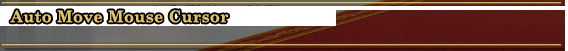
<style>
.page{position:relative;width:568px;height:51px}
.page>*{position:absolute;margin:0}
.t1{font:16px "CenturySchoolbook-Bold";letter-spacing:0.025em;color:#e4c567}
</style>
<div class="page">
<p class="t1" style="left:10px;top:10px;width:219px;height:13px">Auto Move Mouse Cursor</p>
</div>
